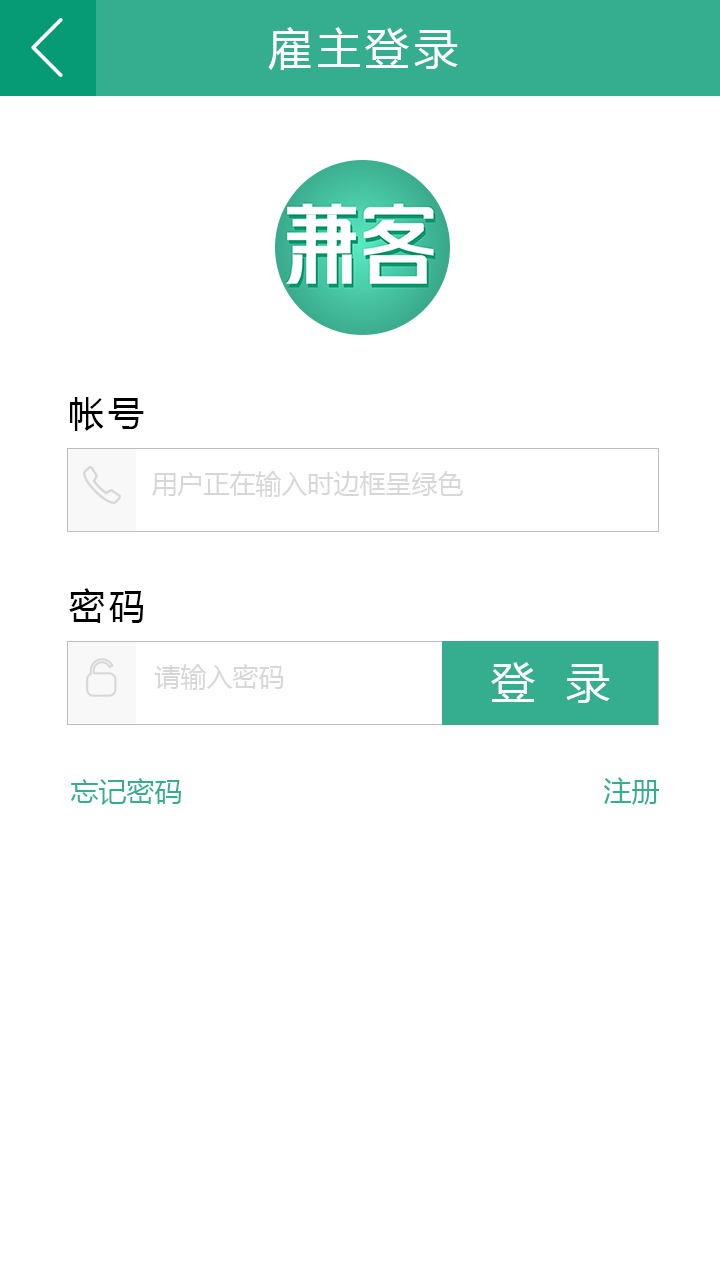
<style>
.page{position:relative;width:720px;height:1280px;background:#ffffff}
.page>*{position:absolute;margin:0}
.t1{font:44px "MicrosoftYaHei";letter-spacing:0.1em;color:#ffffff}
.t2{font:36px "MicrosoftYaHei";letter-spacing:0.1em;color:#000000}
.t3{font:26px "MicrosoftYaHei";color:#d7d7d7}
.t4{font:44px "MicrosoftYaHei";letter-spacing:0.2em;color:#ffffff}
.t5{font:28px "MicrosoftYaHei";color:#35ae8f}
</style>
<div class="page">
<p class="t1" style="left:268px;top:27px;width:190px;height:43px">雇主登录</p>
<p class="t2" style="left:70px;top:397px;width:74px;height:34px">帐号</p>
<p class="t3" style="left:152px;top:471px;width:311px;height:26px">用户正在输入时边框呈绿色</p>
<p class="t2" style="left:69px;top:588px;width:75px;height:35px">密码</p>
<p class="t3" style="left:155px;top:664px;width:129px;height:26px">请输入密码</p>
<p class="t4" style="left:491px;top:662px;width:119px;height:41px">登 录</p>
<p class="t5" style="left:71px;top:778px;width:110px;height:27px">忘记密码</p>
<p class="t5" style="left:603px;top:777px;width:56px;height:28px">注册</p>
</div>
